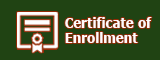
<style>
.page{position:relative;width:160px;height:60px;background:#204313}
.page>*{position:absolute;margin:0}
.t1{font:13.8px "Verdana-Bold";color:#fdfcfc;scale:0.86 1}
</style>
<div class="page">
<p class="t1" style="left:65px;top:17px;width:69px;height:11px">Certificate</p>
<p class="t1" style="left:138px;top:17px;width:14px;height:11px">of</p>
<p class="t1" style="left:65px;top:32px;width:73px;height:11px">Enrollment</p>
</div>
